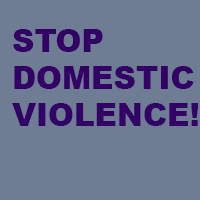
<style>
.page{position:relative;width:200px;height:200px;background:#6f7d94}
.page>*{position:absolute;margin:0}
.t1{font:31px "Arial-Black";color:#330066}
</style>
<div class="page">
<p class="t1" style="left:12px;top:29px;width:186px;height:97px">STOP<br>DOMESTIC<br>VIOLENCE!</p>
</div>
